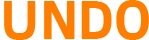
<style>
.page{position:relative;width:149px;height:40px;background:#ffffff}
.page>*{position:absolute;margin:0}
.t1{font:56px "ClearSans-Bold";color:#ff7e00}
</style>
<div class="page">
<p class="t1" style="left:4px;top:0px;width:145px;height:40px">UNDO</p>
</div>
